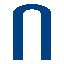
<style>
.page{position:relative;width:64px;height:64px;background:#ffffff}
.page>*{position:absolute;margin:0}
.t1{font:80px "PiemonteRegular";letter-spacing:0.1em;color:#004182;scale:2 1}
</style>
<div class="page">
<p class="t1" style="left:13px;top:4px;width:38px;height:56px">N</p>
</div>
